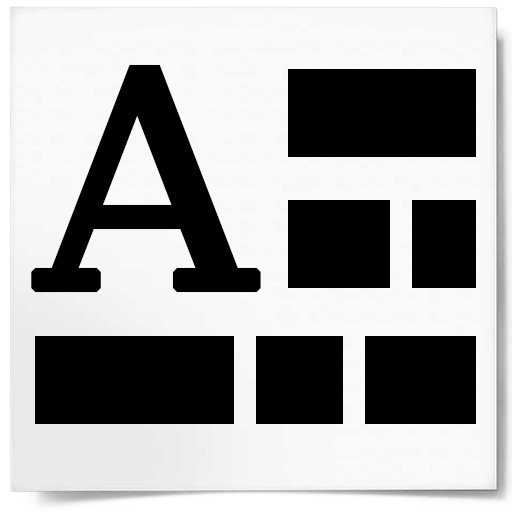
<style>
.page{position:relative;width:512px;height:512px;background:#000000}
.page>*{position:absolute;margin:0}
.t1{font:300px "DejaVuSerif";color:#000000;font-weight:bold}
</style>
<div class="page">
<p class="t1" style="left:31px;top:64px;width:230px;height:229px">A</p>
</div>
